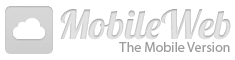
<style>
.page{position:relative;width:235px;height:60px;background:#ffffff}
.page>*{position:absolute;margin:0}
.t1{font:40px "Lobster";color:#e2e2e2}
.t2{font:14px "MyriadPro-Regular";color:#9c9c9c}
</style>
<div class="page">
<p class="t1" style="left:60px;top:9px;width:171px;height:31px">MobileWeb</p>
<p class="t2" style="left:119px;top:42px;width:111px;height:10px">The Mobile Version</p>
</div>
